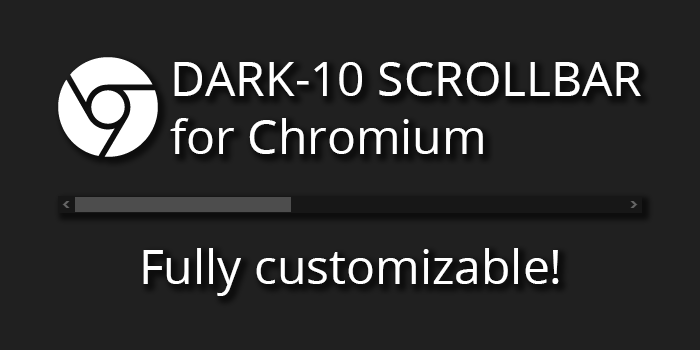
<style>
.page{position:relative;width:700px;height:350px;background:#202020}
.page>*{position:absolute;margin:0}
.t1{font:48px "OpenSans";color:#ffffff}
</style>
<div class="page">
<p class="t1" style="left:170px;top:62px;width:471px;height:92px">DARK-10 SCROLLBAR<br>for Chromium</p>
<p class="t1" style="left:143px;top:248px;width:416px;height:48px">Fully customizable!</p>
</div>
